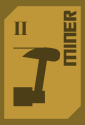
<style>
.page{position:relative;width:85px;height:125px;background:#bf9739}
.page>*{position:absolute;margin:0}
.t1{font:20px "TransformersMovie";letter-spacing:0.04em;color:#4c3f17}
.t2{font:20px "TimesNewRomanPS-BoldMT";letter-spacing:-0.04em;color:#4c3f17}
</style>
<div class="page">
<p class="t1" style="left:63px;top:10px;width:14px;height:56px;rotate:-90deg">miner</p>
<p class="t2" style="left:13px;top:21px;width:15px;height:14px">II</p>
</div>
